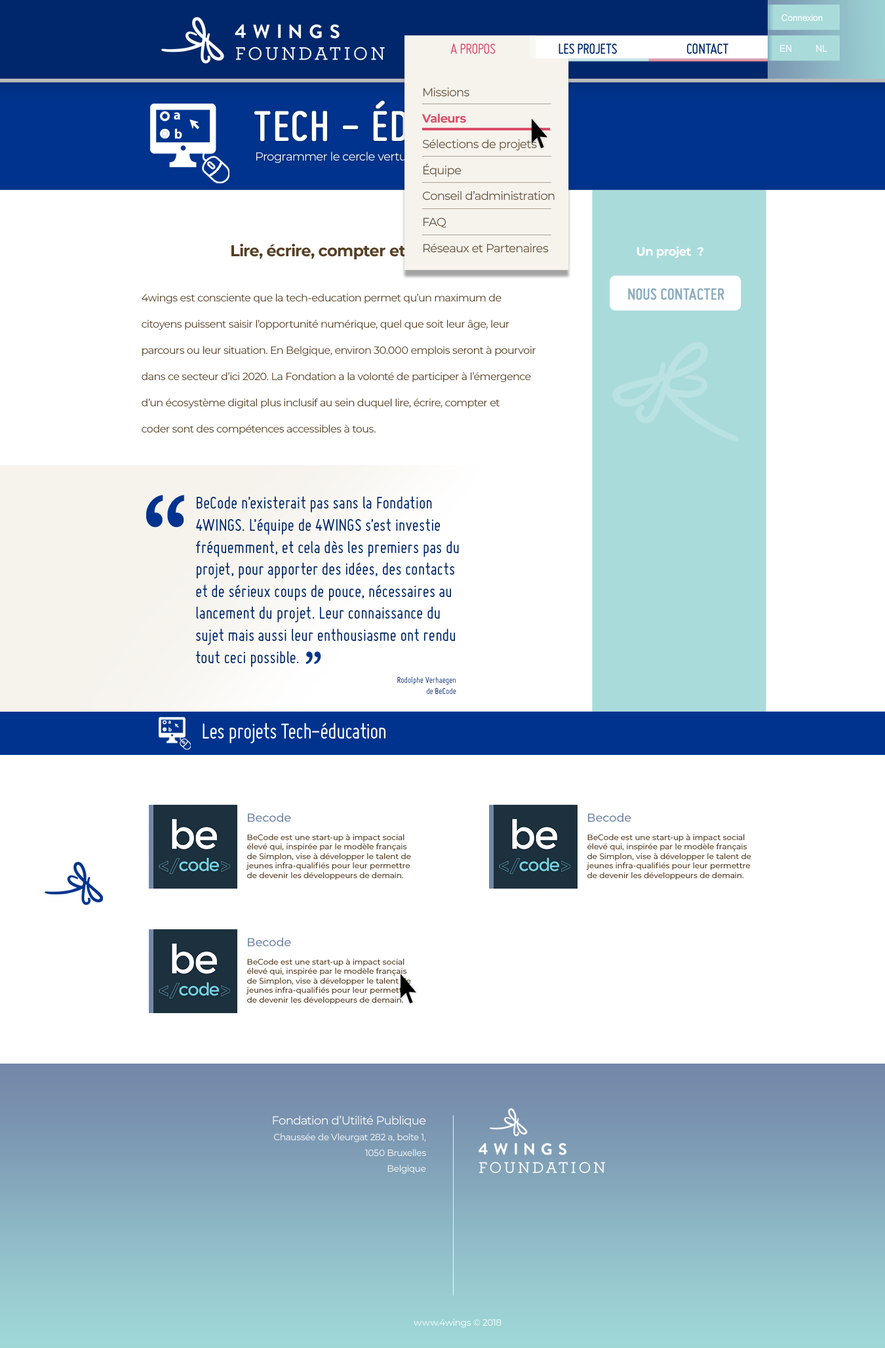
<style>
.page{position:relative;width:885px;height:1348px;background:#ffffff}
.page>*{position:absolute;margin:0}
.t1{font:9.2px "ArialMT";letter-spacing:-0.025em;color:#ffffff}
.t2{font:15.7px "Miso";letter-spacing:-0.025em;color:#00276b}
.t3{font:15.7px "Miso";letter-spacing:-0.025em;color:#f6f3ed}
.t4{font:15.7px "Miso";letter-spacing:-0.025em;color:#db4d69}
.t5{font:9.3px "ArialMT";letter-spacing:-0.025em;color:#ffffff}
.t6{font:11.8px/25.9px "Montserrat-Regular";letter-spacing:-0.025em;color:#604e39}
.t7{font:11.8px/25.9px "Montserrat-Bold";letter-spacing:-0.025em;color:#db4d69}
.t8{font:45.9px "Miso";color:#ffffff;font-weight:bold}
.t9{font:11.8px "Montserrat-Regular";letter-spacing:-0.025em;color:#ffffff}
.t10{font:15.7px "Montserrat-Bold";letter-spacing:-0.025em;color:#564026}
.t11{font:11.8px "Montserrat-Bold";letter-spacing:-0.025em;color:#ffffff}
.t12{font:10.5px/26.2px "Montserrat-Regular";letter-spacing:-0.025em;color:#564026}
.t13{font:17.4px "Miso";letter-spacing:-0.025em;color:#8bacbf;font-weight:bold}
.t14{font:90.1px "Monaco";letter-spacing:-0.025em;color:#00338d}
.t15{font:18.3px "Miso";color:#00276b}
.t16{font:34.8px "Monaco";letter-spacing:-0.025em;color:#00338d}
.t17{font:9.2px "Miso";color:#00276b}
.t18{font:23.6px "Miso";letter-spacing:-0.025em;color:#ffffff}
.t19{font:11.7px "Montserrat-Medium";color:#7388a9}
.t20{font:7.9px "Montserrat-Medium";color:#564026}
</style>
<div class="page">
<p class="t1" style="left:781px;top:14px;width:41px;height:8px">Connexion</p>
<p class="t1" style="left:781px;top:14px;width:41px;height:8px">Connexion</p>
<p class="t2" style="left:450px;top:43px;width:278px;height:11px">A PROPOS                  LES PROJETS           CONTACT</p>
<p class="t2" style="left:450px;top:43px;width:278px;height:11px"><span class="t3">A PROPOS   </span>               LES PROJETS           CONTACT</p>
<p class="t4" style="left:450px;top:43px;width:45px;height:11px">A PROPOS</p>
<p class="t5" style="left:780px;top:45px;width:11px;height:7px">EN</p>
<p class="t5" style="left:780px;top:45px;width:11px;height:7px">EN</p>
<p class="t5" style="left:816px;top:45px;width:11px;height:7px">NL</p>
<p class="t5" style="left:816px;top:45px;width:11px;height:7px">NL</p>
<p class="t6" style="left:421px;top:87px;width:133px;height:165px">Missions<br><span class="t7">Valeurs<br></span>Sélections de projets<br>Équipe<br>Conseil d’administration<br>FAQ<br>Réseaux et Partenaires</p>
<p class="t8" style="left:254px;top:100px;width:285px;height:42px">TECH - ÉDUCATION</p>
<p class="t9" style="left:256px;top:151px;width:243px;height:12px">Programmer le cercle vertueux de l’inclusion</p>
<p class="t10" style="left:231px;top:244px;width:226px;height:15px">Lire, écrire, compter et coder.</p>
<p class="t11" style="left:636px;top:246px;width:67px;height:12px">Un projet  ?</p>
<p class="t12" style="left:142px;top:294px;width:393px;height:140px">4wings est consciente que la tech-education permet qu’un maximum de<br>citoyens puissent saisir l’opportunité numérique, quel que soit leur âge, leur<br>parcours ou leur situation. En Belgique, environ 30.000 emplois seront à pourvoir<br>dans ce secteur d’ici 2020. La Fondation a la volonté de participer à l’émergence<br>d’un écosystème digital plus inclusif au sein duquel lire, écrire, compter et<br>coder sont des compétences accessibles à tous.</p>
<p class="t13" style="left:628px;top:288px;width:96px;height:12px">NOUS CONTACTER</p>
<p class="t14" style="left:146px;top:495px;width:38px;height:33px">“</p>
<p class="t15" style="left:195px;top:496px;width:264px;height:171px">BeCode n’existerait pas sans la Fondation 4WINGS. L’équipe de 4WINGS s’est investie fréquemment, et cela dès les premiers pas du projet, pour apporter des idées, des contacts et de sérieux coups de pouce, nécessaires au lancement du projet. Leur connaissance du sujet mais aussi leur enthousiasme ont rendu tout ceci possible.</p>
<p class="t16" style="left:306px;top:651px;width:15px;height:13px">”</p>
<p class="t17" style="left:397px;top:676px;width:59px;height:18px;text-align:right">Rodolphe Verhaegen<br>de BeCode</p>
<p class="t18" style="left:202px;top:723px;width:183px;height:21px">Les projets Tech-éducation</p>
<p class="t19" style="left:248px;top:813px;width:43px;height:9px">Becode</p>
<p class="t19" style="left:588px;top:813px;width:43px;height:9px">Becode</p>
<p class="t20" style="left:246px;top:834px;width:165px;height:46px">BeCode est une start-up à impact social<br>élevé qui, inspirée par le modèle français<br>de Simplon, vise à développer le talent de<br>jeunes infra-qualifiés pour leur permettre<br>de devenir les développeurs de demain.</p>
<p class="t20" style="left:586px;top:834px;width:165px;height:46px">BeCode est une start-up à impact social<br>élevé qui, inspirée par le modèle français<br>de Simplon, vise à développer le talent de<br>jeunes infra-qualifiés pour leur permettre<br>de devenir les développeurs de demain.</p>
<p class="t19" style="left:248px;top:937px;width:43px;height:9px">Becode</p>
<p class="t20" style="left:246px;top:959px;width:165px;height:46px">BeCode est une start-up à impact social<br>élevé qui, inspirée par le modèle français<br>de Simplon, vise à développer le talent de<br>jeunes infra-qualifiés pour leur permettre<br>de devenir les développeurs de demain.</p>
</div>
